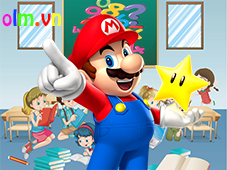
<style>
.page{position:relative;width:227px;height:170px}
.page>*{position:absolute;margin:0}
.t1{font:19.6px "VNI-Hobo";color:#fe0ed4}
.t2{font:19.6px "VNI-Hobo";color:#0e3bfe}
.t3{font:19.6px "VNI-Hobo";color:#46fe0e}
.t4{font:19.6px "VNI-Hobo";color:#fe520e}
.t5{font:19.6px "VNI-Hobo";color:#fc0303}
.t6{font:19.6px "VNI-Hobo";color:#f8fb20}
</style>
<div class="page">
<p class="t1" style="left:2px;top:9px;width:59px;height:18px">o<span class="t2">l</span><span class="t3">m</span><span class="t4">.</span><span class="t5">v</span><span class="t6">n</span></p>
</div>
